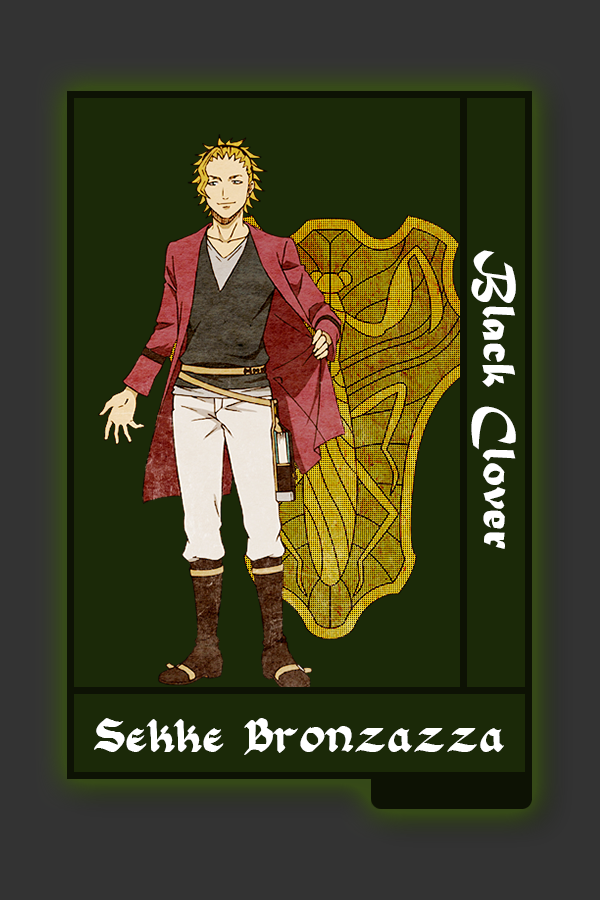
<style>
.page{position:relative;width:600px;height:900px;background:#1b2908}
.page>*{position:absolute;margin:0}
.t1{font:48.8px "MaturaMTScriptCapitals";color:#ffffff}
.t2{font:40px "FloranteatLaura";color:#ffffff}
</style>
<div class="page">
<p class="t1" style="left:471px;top:250px;width:45px;height:299px;rotate:90deg">Black Clover</p>
<p class="t2" style="left:94px;top:718px;width:410px;height:37px">Sekke Bronzazza</p>
</div>
